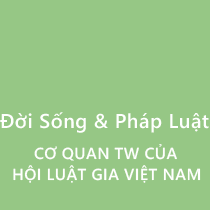
<style>
.page{position:relative;width:210px;height:210px;background:#96c785}
.page>*{position:absolute;margin:0}
.t1{font:20px "SegoeWP-Semibold";letter-spacing:0.025em;color:#ffffff}
.t2{font:16px "SegoeWP-Semibold";letter-spacing:0.025em;color:#fefefe}
.t3{font:16px "SegoeWP-Semibold";letter-spacing:0.025em;color:#ffffff}
</style>
<div class="page">
<p class="t1" style="left:0px;top:112px;width:209px;height:21px">Đời Sống &amp; Pháp Luật</p>
<p class="t2" style="left:34px;top:144px;width:143px;height:17px">CƠ QUAN TW CỦA</p>
<p class="t3" style="left:13px;top:165px;width:188px;height:18px">HỘI LUẬT GIA VIỆT NAM</p>
</div>
